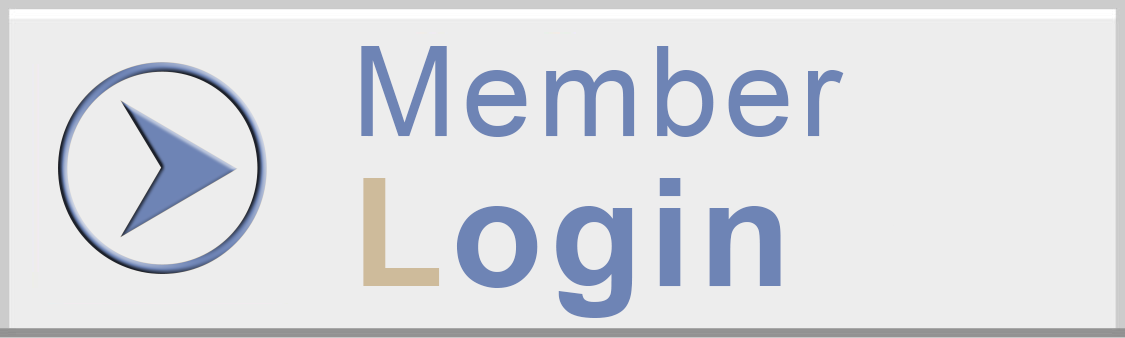
<style>
.page{position:relative;width:1125px;height:338px;background:#ededed}
.page>*{position:absolute;margin:0}
.t1{font:125px/150px "ArialMT";letter-spacing:0.05em;color:#6e84b5}
.t2{font:150px/150px "Arial-BoldMT";letter-spacing:0.05em;color:#cebb9b}
.t3{font:150px/150px "Arial-BoldMT";letter-spacing:0.05em;color:#6e84b5}
</style>
<div class="page">
<p class="t1" style="left:361px;top:46px;width:483px;height:272px">Member<br><span class="t2">L</span><span class="t3">ogin</span></p>
</div>
